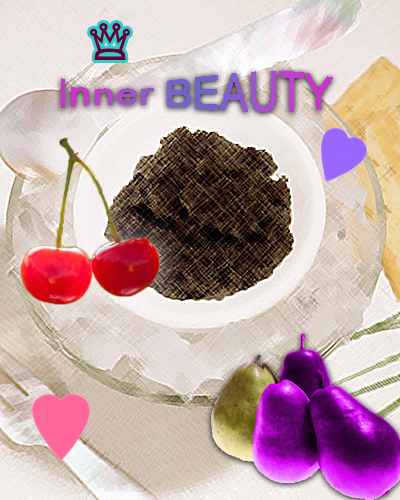
<style>
.page{position:relative;width:400px;height:500px}
.page>*{position:absolute;margin:0}
.t1{font:42px "ArialMT"}
</style>
<div class="page">
<p class="t1" style="left:61px;top:71px;width:272px;height:41px">Inner BEAUTY</p>
</div>
